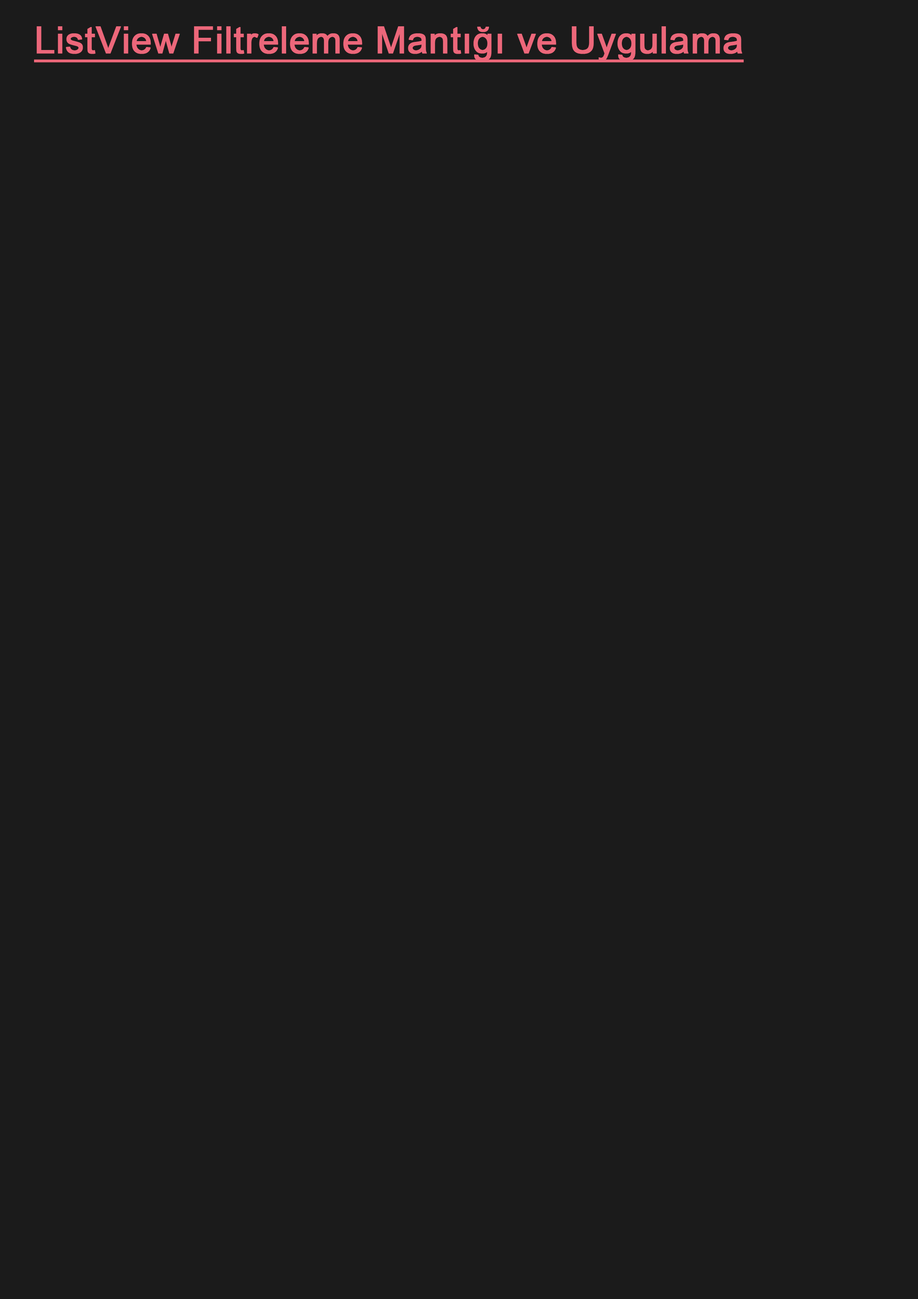
<style>
.page{position:relative;width:918px;height:1299px;background:#1b1b1b}
.page>*{position:absolute;margin:0}
.t1{font:37px "ArialMT";color:#ec677a;font-weight:bold;text-decoration:underline}
</style>
<div class="page">
<p class="t1" style="left:34px;top:26px;width:710px;height:37px">ListView Filtreleme Mantığı ve Uygulama</p>
</div>
